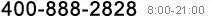
<style>
.page{position:relative;width:212px;height:17px;background:#ffffff}
.page>*{position:absolute;margin:0}
.t1{font:20px "ArialMT";letter-spacing:0.05em;color:#000000}
.t2{font:11px "ArialMT";letter-spacing:0.05em;color:#7f7f7f}
</style>
<div class="page">
<p class="t1" style="left:1px;top:1px;width:136px;height:15px">400-888-2828</p>
<p class="t2" style="left:148px;top:6px;width:56px;height:8px">8:00-21:00</p>
</div>
